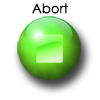
<style>
.page{position:relative;width:100px;height:100px;background:#ffffff}
.page>*{position:absolute;margin:0}
.t1{font:13.3px "CenturyGothic";color:#020202}
</style>
<div class="page">
<p class="t1" style="left:32px;top:3px;width:36px;height:11px">Abort</p>
</div>
